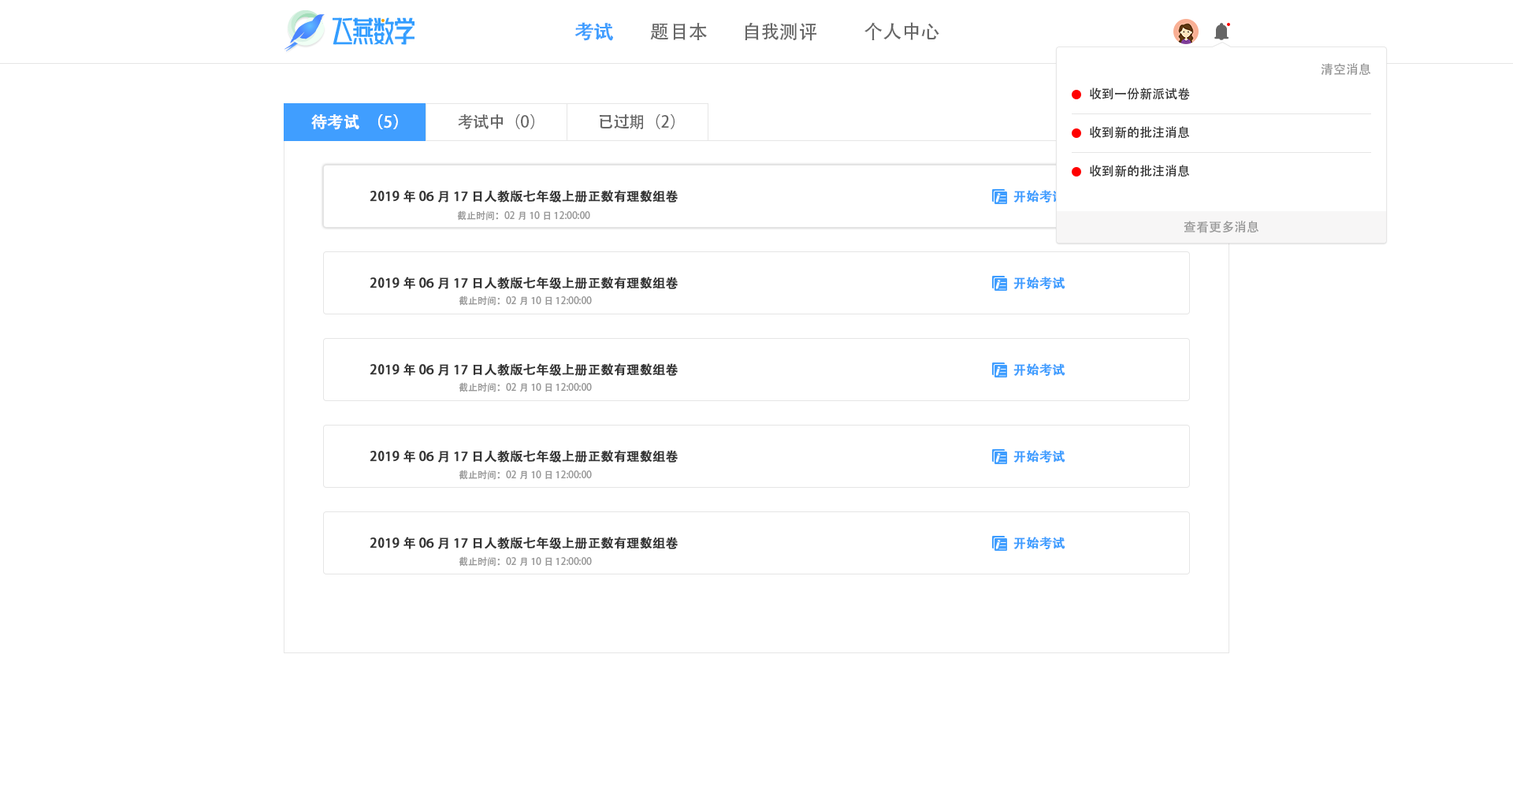
<style>
.page{position:relative;width:1513px;height:788px;background:#ffffff}
.page>*{position:absolute;margin:0}
.t1{font:18.9px "AdobeHeitiStd-Regular";color:#409eff;font-weight:bold}
.t2{font:18.9px "AdobeHeitiStd-Regular";color:#666666}
.t3{font:12.6px "AdobeHeitiStd-Regular";color:#999999}
.t4{font:12.6px "AdobeHeitiStd-Regular";color:#333333}
.t5{font:15.8px "AdobeHeitiStd-Regular";color:#ffffff;font-weight:bold}
.t6{font:15.8px "AdobeHeitiStd-Regular";color:#666666}
.t7{font:12.6px "AdobeHeitiStd-Regular";color:#333333;font-weight:bold}
.t8{font:12.6px "AdobeHeitiStd-Regular";color:#409eff;font-weight:bold}
.t9{font:9.5px "AdobeHeitiStd-Regular";color:#999999}
</style>
<div class="page">
<p class="t1" style="left:575px;top:22px;width:38px;height:19px">考试</p>
<p class="t2" style="left:650px;top:23px;width:57px;height:17px">题目本</p>
<p class="t2" style="left:745px;top:22px;width:71px;height:19px">自我测评</p>
<p class="t2" style="left:865px;top:22px;width:74px;height:18px">个人中心</p>
<p class="t3" style="left:1321px;top:63px;width:50px;height:13px">清空消息</p>
<p class="t4" style="left:1090px;top:87px;width:100px;height:13px">收到一份新派试卷</p>
<p class="t5" style="left:311px;top:114px;width:87px;height:16px">待考试（5）</p>
<p class="t6" style="left:458px;top:114px;width:76px;height:15px">考试中（0）</p>
<p class="t6" style="left:600px;top:114px;width:75px;height:15px">已过期（2）</p>
<p class="t4" style="left:1090px;top:126px;width:100px;height:13px">收到新的批注消息</p>
<p class="t4" style="left:1090px;top:165px;width:100px;height:12px">收到新的批注消息</p>
<p class="t7" style="left:370px;top:190px;width:309px;height:13px">2019年06月17日人教版七年级上册正数有理数组卷</p>
<p class="t8" style="left:1013px;top:190px;width:52px;height:13px">开始考试</p>
<p class="t9" style="left:457px;top:210px;width:133px;height:11px">截止时间：02月10日 12:00:00</p>
<p class="t3" style="left:1184px;top:221px;width:75px;height:12px">查看更多消息</p>
<p class="t7" style="left:370px;top:277px;width:309px;height:12px">2019年06月17日人教版七年级上册正数有理数组卷</p>
<p class="t8" style="left:1013px;top:277px;width:52px;height:13px">开始考试</p>
<p class="t9" style="left:459px;top:296px;width:133px;height:10px">截止时间：02月10日 12:00:00</p>
<p class="t7" style="left:370px;top:363px;width:309px;height:13px">2019年06月17日人教版七年级上册正数有理数组卷</p>
<p class="t8" style="left:1013px;top:363px;width:52px;height:14px">开始考试</p>
<p class="t9" style="left:459px;top:382px;width:133px;height:10px">截止时间：02月10日 12:00:00</p>
<p class="t7" style="left:370px;top:450px;width:309px;height:13px">2019年06月17日人教版七年级上册正数有理数组卷</p>
<p class="t8" style="left:1013px;top:450px;width:52px;height:13px">开始考试</p>
<p class="t9" style="left:459px;top:470px;width:133px;height:10px">截止时间：02月10日 12:00:00</p>
<p class="t7" style="left:370px;top:537px;width:309px;height:12px">2019年06月17日人教版七年级上册正数有理数组卷</p>
<p class="t8" style="left:1013px;top:537px;width:52px;height:13px">开始考试</p>
<p class="t9" style="left:459px;top:556px;width:133px;height:11px">截止时间：02月10日 12:00:00</p>
</div>
